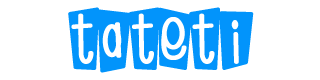
<style>
.page{position:relative;width:320px;height:80px;background:#ffffff}
.page>*{position:absolute;margin:0}
.t1{font:81.9px "KlinkOMite";color:#0294fb;scale:1.11 1}
</style>
<div class="page">
<p class="t1" style="left:68px;top:7px;width:186px;height:66px">tateti</p>
</div>
